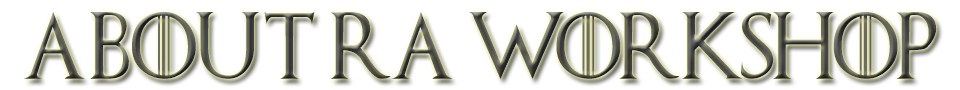
<style>
.page{position:relative;width:960px;height:90px;background:#ffffff}
.page>*{position:absolute;margin:0}
.t1{font:66.7px "GameofThrones";scale:0.96 1}
</style>
<div class="page">
<p class="t1" style="left:24px;top:12px;width:913px;height:67px">ABOUT RA WORKSHOP</p>
</div>
